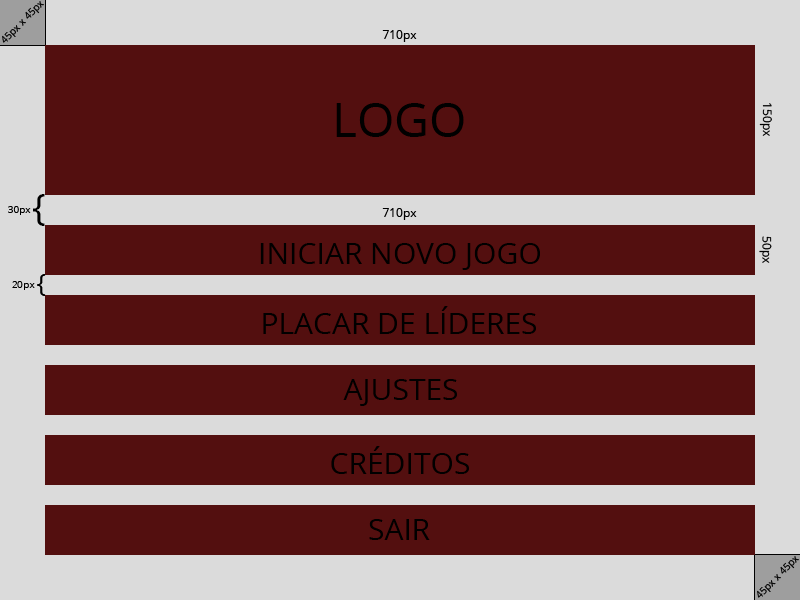
<style>
.page{position:relative;width:800px;height:600px;background:#530f0f}
.page>*{position:absolute;margin:0}
.t1{font:48px "OpenSans";color:#000000}
.t2{font:30px "OpenSans";color:#000000}
</style>
<div class="page">
<p class="t1" style="left:336px;top:103px;width:128px;height:34px">LOGO</p>
<p class="t2" style="left:260px;top:243px;width:280px;height:27px">INICIAR NOVO JOGO</p>
<p class="t2" style="left:263px;top:306px;width:273px;height:28px">PLACAR DE LÍDERES</p>
<p class="t2" style="left:343px;top:379px;width:114px;height:27px">AJUSTES</p>
<p class="t2" style="left:331px;top:446px;width:138px;height:28px">CRÉDITOS</p>
<p class="t2" style="left:369px;top:519px;width:61px;height:21px">SAIR</p>
</div>
